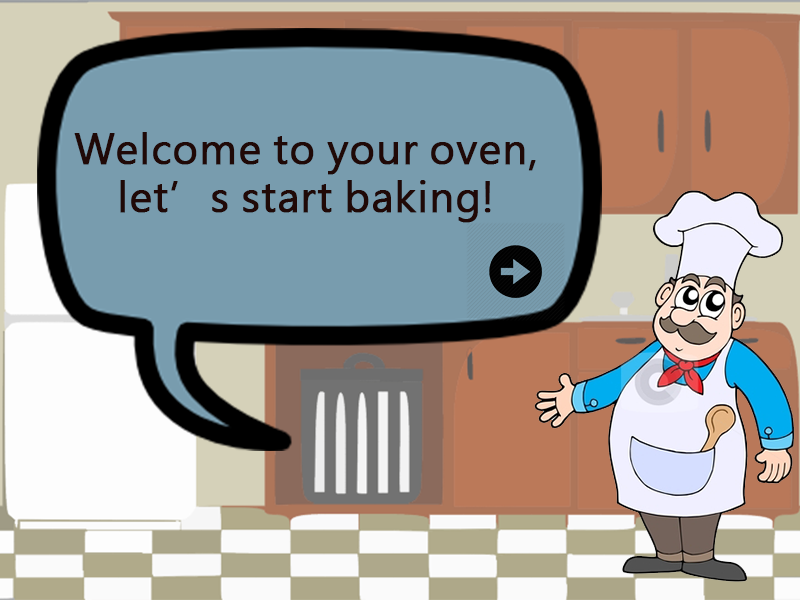
<style>
.page{position:relative;width:800px;height:600px;background:#789cae}
.page>*{position:absolute;margin:0}
.t1{font:40px "MicrosoftJhengHeiRegular";letter-spacing:0.009em;color:#200907;font-weight:bold}
</style>
<div class="page">
<p class="t1" style="left:74px;top:132px;width:462px;height:91px;text-align:center">Welcome to your oven,<br>let’s start baking!</p>
</div>
